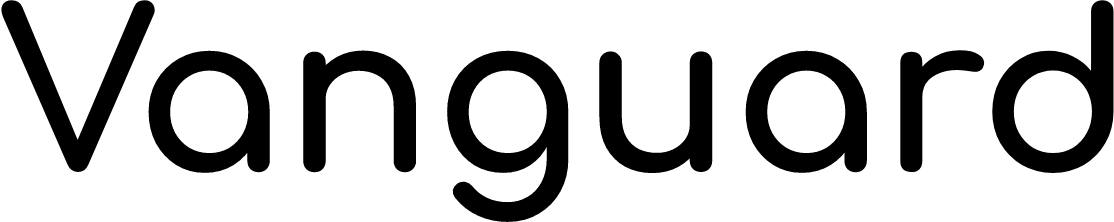
<style>
.page{position:relative;width:1114px;height:222px;background:#ffffff}
.page>*{position:absolute;margin:0}
.t1{font:220px "Comfortaa-Bold";color:#000000}
</style>
<div class="page">
<p class="t1" style="left:0px;top:0px;width:1114px;height:222px">Vanguard</p>
</div>
